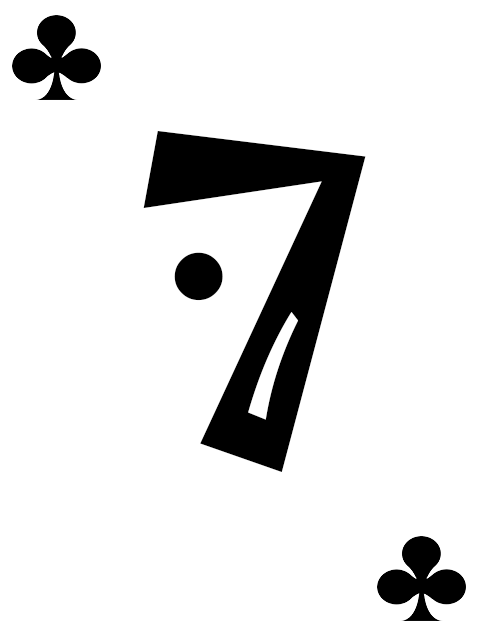
<style>
.page{position:relative;width:480px;height:640px;background:#ffffff}
.page>*{position:absolute;margin:0}
.t1{font:386.3px "Jokerman-Regular";color:#000000}
</style>
<div class="page">
<p class="t1" style="left:143px;top:131px;width:223px;height:341px">7</p>
</div>
